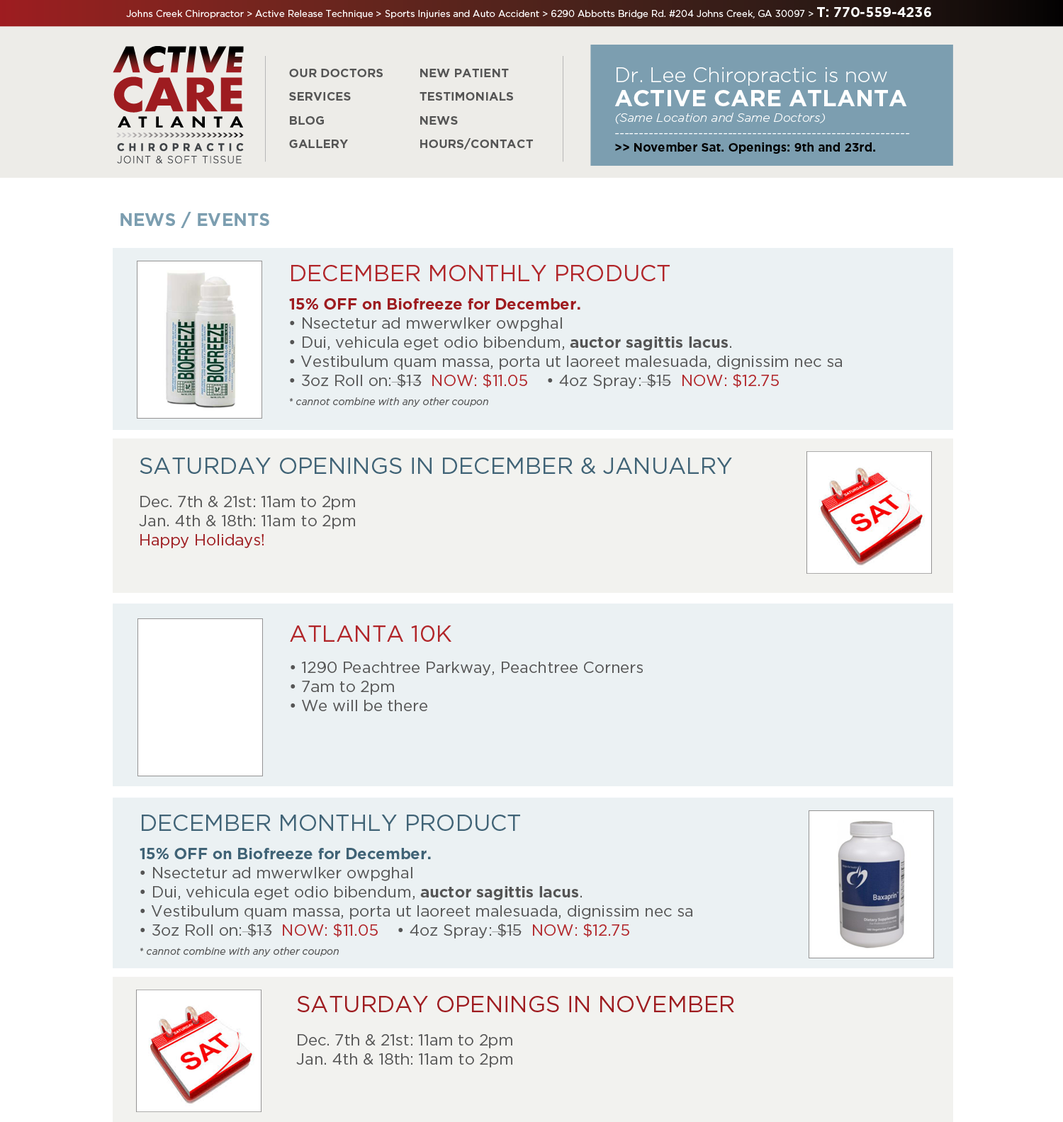
<style>
.page{position:relative;width:1063px;height:1122px;background:#ffffff}
.page>*{position:absolute;margin:0}
.t1{font:9.2px "GothamHTF-Book";color:#ffffff}
.t2{font:13.5px "GothamHTF-Bold";color:#ffffff}
.t3{font:12px "GothamHTF-Bold";color:#555555}
.t4{font:12px/15.6px "GothamHTF-LightItalic";color:#ffffff}
.t5{font:20.5px/21.2px "GothamHTF-Light";color:#ffffff}
.t6{font:23.4px/24.1px "GothamHTF-Bold";color:#ffffff}
.t7{font:12px/14.2px "GothamHTF-Bold";color:#000000}
.t8{font:17.7px "GothamHTF-Bold";color:#7c9eb0}
.t9{font:15.6px/19.1px "GothamHTF-Book";color:#555555}
.t10{font:22.7px/14.2px "GothamHTF-Book";color:#b12529;text-transform:uppercase}
.t11{font:15.6px/14.2px "GothamHTF-Bold";color:#9e1c20}
.t12{font:15.6px/19.1px "GothamHTF-Bold";color:#555555}
.t13{font:15.6px/19.1px "GothamHTF-Book";color:#b12529}
.t14{font:9.9px/19.1px "GothamHTF-BookItalic";color:#555555}
.t15{font:22.7px/12px "GothamHTF-Book";color:#406376;text-transform:uppercase}
.t16{font:15.6px/19.1px "GothamHTF-Book";color:#9e1c20}
.t17{font:22.7px "GothamHTF-Book";color:#b12529;text-transform:uppercase}
.t18{font:22.7px/14.2px "GothamHTF-Book";color:#406376;text-transform:uppercase}
.t19{font:15.6px/14.2px "GothamHTF-Bold";color:#406376}
.t20{font:22.7px/12px "GothamHTF-Book";color:#9e1c20;text-transform:uppercase}
</style>
<div class="page">
<p class="t1" style="left:126px;top:7px;width:805px;height:12px">Johns Creek Chiropractor &gt; Active Release Technique &gt; Sports Injuries and Auto Accident &gt; 6290 Abbotts Bridge Rd. #204 Johns Creek, GA 30097 &gt; <span class="t2">T: 770-559-4236</span></p>
<p class="t3" style="left:289px;top:69px;width:94px;height:8px">OUR DOCTORS</p>
<p class="t3" style="left:420px;top:69px;width:89px;height:8px">NEW PATIENT</p>
<p class="t4" style="left:614px;top:67px;width:296px;height:87px"><span class="t5">Dr. Lee Chiropractic is now <br></span><span class="t6">ACTIVE CARE ATLANTA<br></span>(Same Location and Same Doctors)<br>------------------------------------------------------------<br><span class="t7">&gt;&gt; November Sat. Openings: 9th and 23rd.</span></p>
<p class="t3" style="left:289px;top:92px;width:62px;height:9px">SERVICES</p>
<p class="t3" style="left:419px;top:92px;width:94px;height:9px">TESTIMONIALS</p>
<p class="t3" style="left:290px;top:116px;width:34px;height:9px">BLOG</p>
<p class="t3" style="left:420px;top:116px;width:38px;height:9px">NEWS</p>
<p class="t3" style="left:289px;top:140px;width:59px;height:8px">GALLERY</p>
<p class="t3" style="left:420px;top:138px;width:113px;height:11px">HOURS/CONTACT</p>
<p class="t8" style="left:120px;top:212px;width:149px;height:16px">NEWS / EVENTS</p>
<p class="t9" style="left:289px;top:265px;width:553px;height:142px"><span class="t10">december monthly product<br><br></span><span class="t11">15% OFF on Biofreeze for December. <br></span>• Nsectetur ad mwerwlker owpghal<br>• Dui, vehicula eget odio bibendum, <span class="t12">auctor sagittis lacus</span>. <br>• Vestibulum quam massa, porta ut laoreet malesuada, dignissim nec sa<br>• 3oz Roll on: $13  <span class="t13">NOW: $11.05    </span>• 4oz Spray: $15  <span class="t13">NOW: $12.75<br></span><span class="t14">* cannot combine with any other coupon</span></p>
<p class="t9" style="left:139px;top:458px;width:593px;height:90px"><span class="t15">saturday openings in December &amp; Janualry<br><br></span>Dec. 7th &amp; 21st: 11am to 2pm <br>Jan. 4th &amp; 18th: 11am to 2pm <br><span class="t16">Happy Holidays!</span></p>
<p class="t9" style="left:290px;top:626px;width:353px;height:85px"><span class="t17">Atlanta 10K <br><br></span>• 1290 Peachtree Parkway, Peachtree Corners<br>• 7am to 2pm <br>• We will be there</p>
<p class="t9" style="left:140px;top:815px;width:552px;height:142px"><span class="t18">december monthly product<br><br></span><span class="t19">15% OFF on Biofreeze for December. <br></span>• Nsectetur ad mwerwlker owpghal<br>• Dui, vehicula eget odio bibendum, <span class="t12">auctor sagittis lacus</span>. <br>• Vestibulum quam massa, porta ut laoreet malesuada, dignissim nec sa<br>• 3oz Roll on: $13  <span class="t13">NOW: $11.05    </span>• 4oz Spray: $15  <span class="t13">NOW: $12.75<br></span><span class="t14">* cannot combine with any other coupon</span></p>
<p class="t9" style="left:296px;top:996px;width:438px;height:72px"><span class="t20">saturday openings in November<br><br></span>Dec. 7th &amp; 21st: 11am to 2pm <br>Jan. 4th &amp; 18th: 11am to 2pm</p>
</div>
